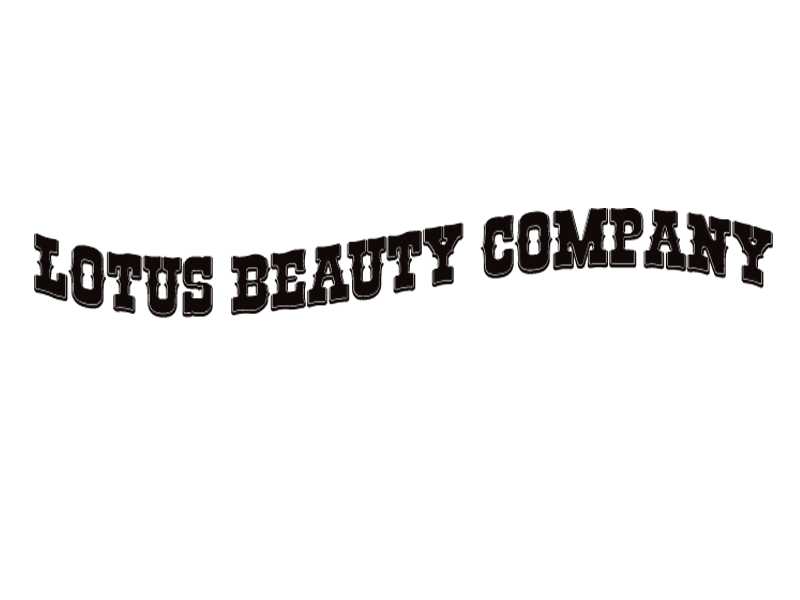
<style>
.page{position:relative;width:800px;height:600px;background:#ffffff}
.page>*{position:absolute;margin:0}
.t1{font:84.6px "RioGrande-Bold";letter-spacing:0.01em;color:#100908;scale:0.76 1}
</style>
<div class="page">
<p class="t1" style="left:34px;top:208px;width:739px;height:110px">LOTUS BEAUTY COMPANY</p>
</div>
